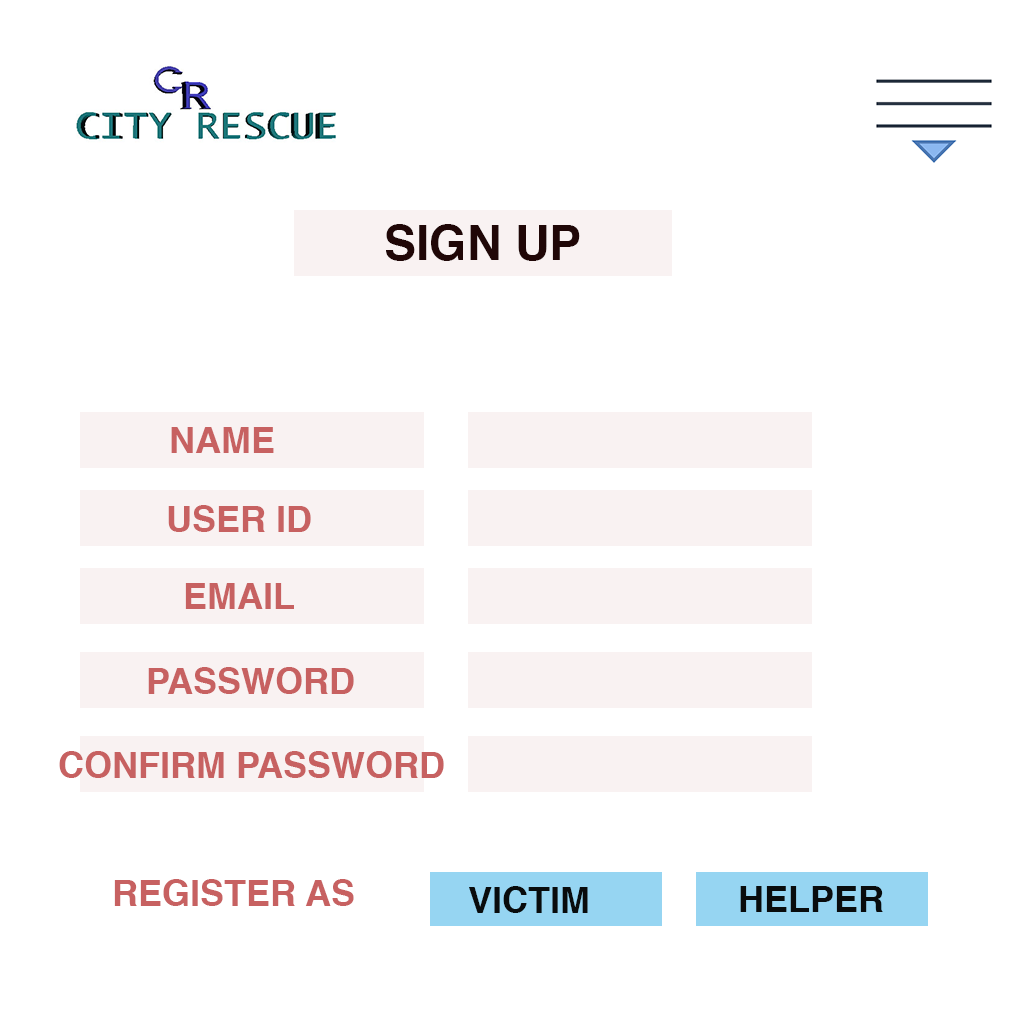
<style>
.page{position:relative;width:1024px;height:1024px;background:#ffffff}
.page>*{position:absolute;margin:0}
.t1{font:48px "Helvetica-Bold";color:#200707;text-transform:uppercase}
.t2{font:36px "Helvetica-Bold";color:#c76161;text-transform:uppercase}
.t3{font:36px "Helvetica-Bold";color:#090c0d;text-transform:uppercase}
</style>
<div class="page">
<p class="t1" style="left:386px;top:224px;width:194px;height:37px">sign up</p>
<p class="t2" style="left:171px;top:427px;width:103px;height:26px">name</p>
<p class="t2" style="left:168px;top:505px;width:143px;height:27px">user id</p>
<p class="t2" style="left:185px;top:583px;width:109px;height:26px">email</p>
<p class="t2" style="left:148px;top:667px;width:206px;height:27px">password</p>
<p class="t2" style="left:59px;top:751px;width:385px;height:27px">confirm password</p>
<p class="t2" style="left:114px;top:879px;width:240px;height:27px">REGISTER AS</p>
<p class="t3" style="left:469px;top:886px;width:119px;height:27px">victim</p>
<p class="t3" style="left:740px;top:886px;width:143px;height:26px">helper</p>
</div>
